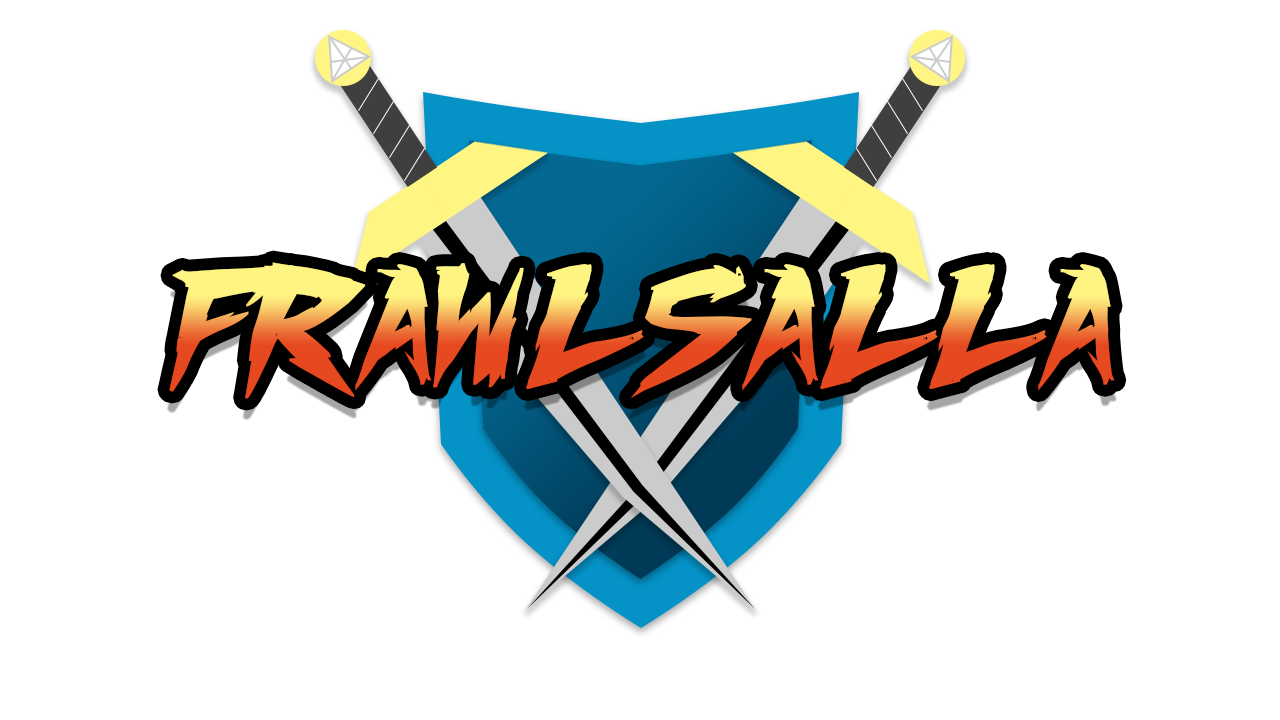
<style>
.page{position:relative;width:1280px;height:720px;background:#ffffff}
.page>*{position:absolute;margin:0}
.t1{font:133.3px "FightingSpiritturbo-BoldItalic"}
</style>
<div class="page">
<p class="t1" style="left:169px;top:262px;width:946px;height:137px">FRAWLSALLA</p>
</div>
